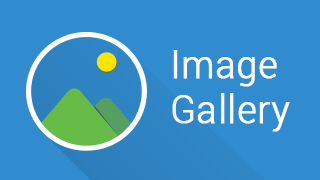
<style>
.page{position:relative;width:320px;height:180px;background:#318ccf}
.page>*{position:absolute;margin:0}
.t1{font:39.4px/45px "Roboto-Light";color:#ffffff;font-weight:bold;scale:0.95 1}
</style>
<div class="page">
<p class="t1" style="left:172px;top:50px;width:118px;height:82px;text-align:justify">Image<br>Gallery</p>
</div>
